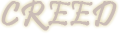
<style>
.page{position:relative;width:121px;height:35px;background:#ffffff}
.page>*{position:absolute;margin:0}
.t1{font:36px "Pristina-Regular";color:#cbbdb7;font-weight:bold}
</style>
<div class="page">
<p class="t1" style="left:1px;top:0px;width:116px;height:31px">CREED</p>
</div>
